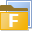
<style>
.page{position:relative;width:32px;height:32px}
.page>*{position:absolute;margin:0}
.t1{font:18px "SegoeUI-Bold";color:#fefeff;scale:1.2 1}
</style>
<div class="page">
<p class="t1" style="left:9px;top:14px;width:10px;height:13px">F</p>
</div>
